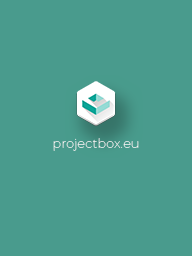
<style>
.page{position:relative;width:192px;height:256px;background:#499b8d}
.page>*{position:absolute;margin:0}
.t1{font:12.9px "Montserrat-Thin";letter-spacing:0.025em;color:#f8f8f8}
</style>
<div class="page">
<p class="t1" style="left:53px;top:138px;width:86px;height:13px">projectbox.eu</p>
</div>
